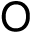
<style>
.page{position:relative;width:32px;height:32px;background:#ffffff}
.page>*{position:absolute;margin:0}
.t1{font:42px "NirmalaUI";color:#000000}
</style>
<div class="page">
<p class="t1" style="left:1px;top:1px;width:29px;height:31px">O</p>
</div>
